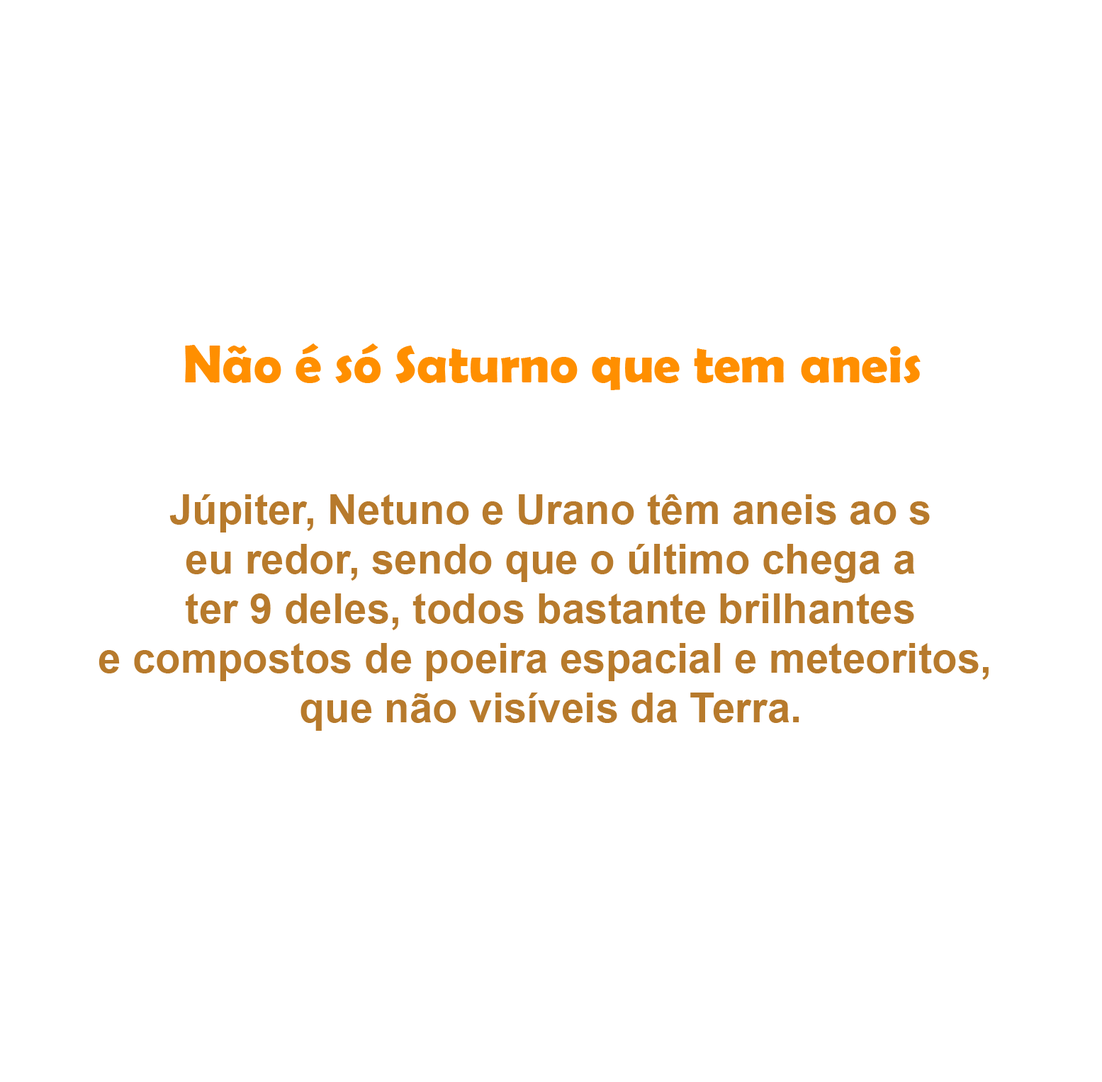
<style>
.page{position:relative;width:1102px;height:1082px;background:#ffffff}
.page>*{position:absolute;margin:0}
.t1{font:53.1px "BerlinSansFBDemi-Bold";color:#ff8f00}
.t2{font:41.3px "Arial-BoldMT";color:#b77a2c}
.t3{font:41.3px "BerlinSansFBDemi-Bold";color:#ff8f00}
</style>
<div class="page">
<p class="t1" style="left:185px;top:344px;width:735px;height:46px">Não é só Saturno que tem aneis</p>
<p class="t2" style="left:98px;top:494px;width:890px;height:237px"><span class="t3"><br><br></span>Júpiter, Netuno e Urano têm aneis ao s<br>eu redor, sendo que o último chega a<br> ter 9 deles, todos bastante brilhantes <br>e compostos de poeira espacial e meteoritos, <br>que não visíveis da Terra.</p>
</div>
